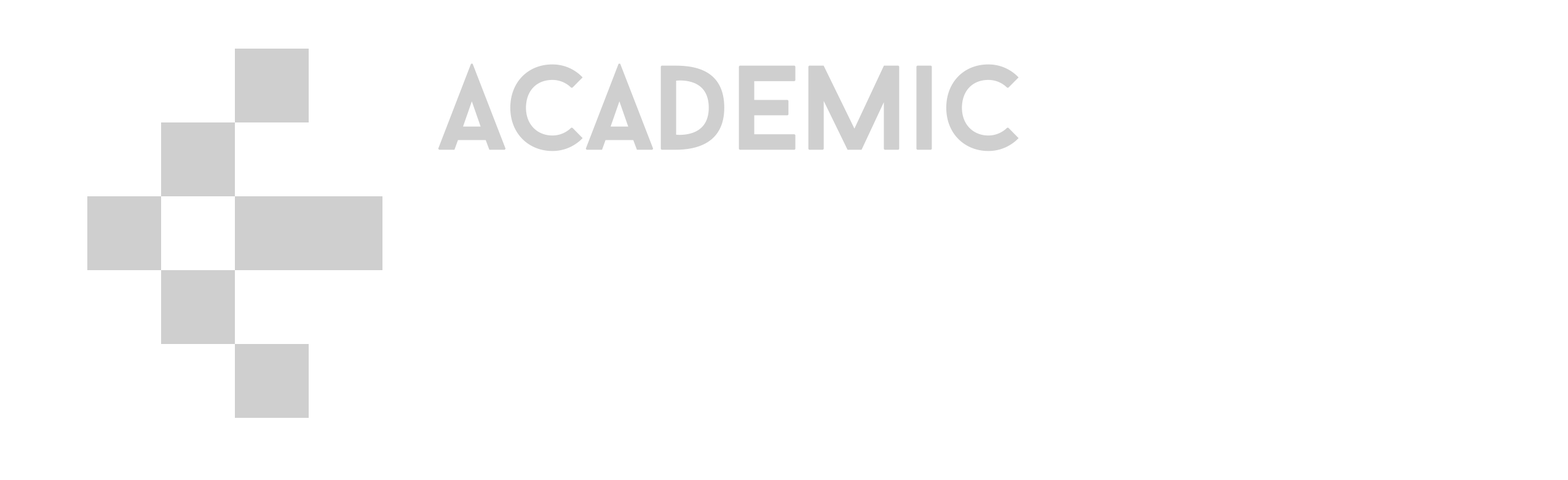
<style>
.page{position:relative;width:1568px;height:480px;background:#ffffff}
.page>*{position:absolute;margin:0}
.t1{font:117.9px "BaronNeue";letter-spacing:-0.025em;color:#cfcfcf;font-weight:bold}
</style>
<div class="page">
<p class="t1" style="left:438px;top:63px;width:581px;height:88px">Academic</p>
</div>
